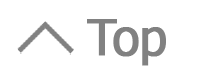
<style>
.page{position:relative;width:200px;height:75px;background:#ffffff}
.page>*{position:absolute;margin:0}
.t1{font:48.6px "Tahoma";color:#818181;font-weight:bold}
</style>
<div class="page">
<p class="t1" style="left:87px;top:19px;width:79px;height:47px">Top</p>
</div>
